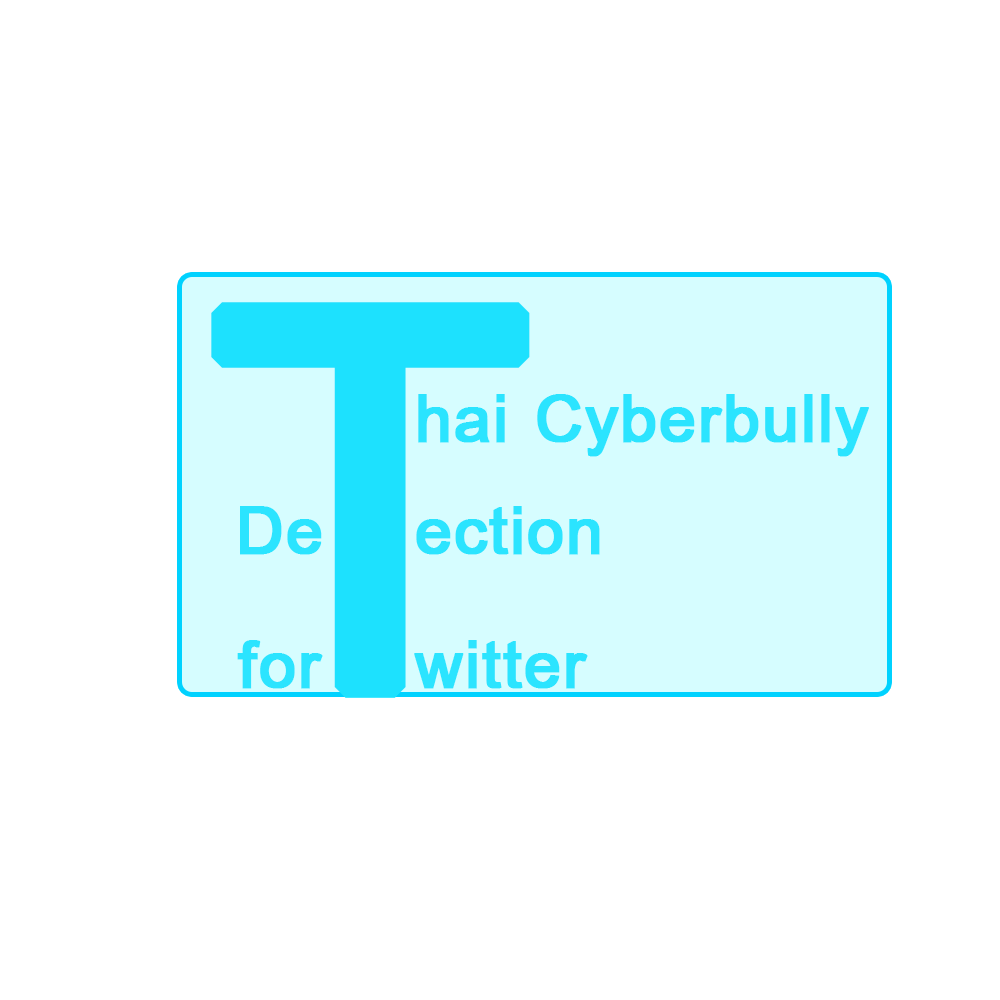
<style>
.page{position:relative;width:1000px;height:1000px;background:#ffffff}
.page>*{position:absolute;margin:0}
.t1{font:800px "BrowalliaNew";color:#1de1fe;font-weight:bold}
.t2{font:100px "BrowalliaNew";color:#2be4ff;font-weight:bold}
</style>
<div class="page">
<p class="t1" style="left:211px;top:302px;width:319px;height:396px">T</p>
<p class="t2" style="left:418px;top:394px;width:451px;height:63px">hai Cyberbully</p>
<p class="t2" style="left:240px;top:506px;width:82px;height:49px">De</p>
<p class="t2" style="left:416px;top:506px;width:184px;height:49px">ection</p>
<p class="t2" style="left:237px;top:640px;width:86px;height:49px">for</p>
<p class="t2" style="left:414px;top:640px;width:174px;height:49px">witter</p>
</div>
